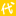
<style>
.page{position:relative;width:16px;height:16px;background:#ffce00}
.page>*{position:absolute;margin:0}
.t1{font:14.1px "AaJoanna";color:#ffffff}
</style>
<div class="page">
<p class="t1" style="left:1px;top:1px;width:14px;height:14px">代</p>
</div>
